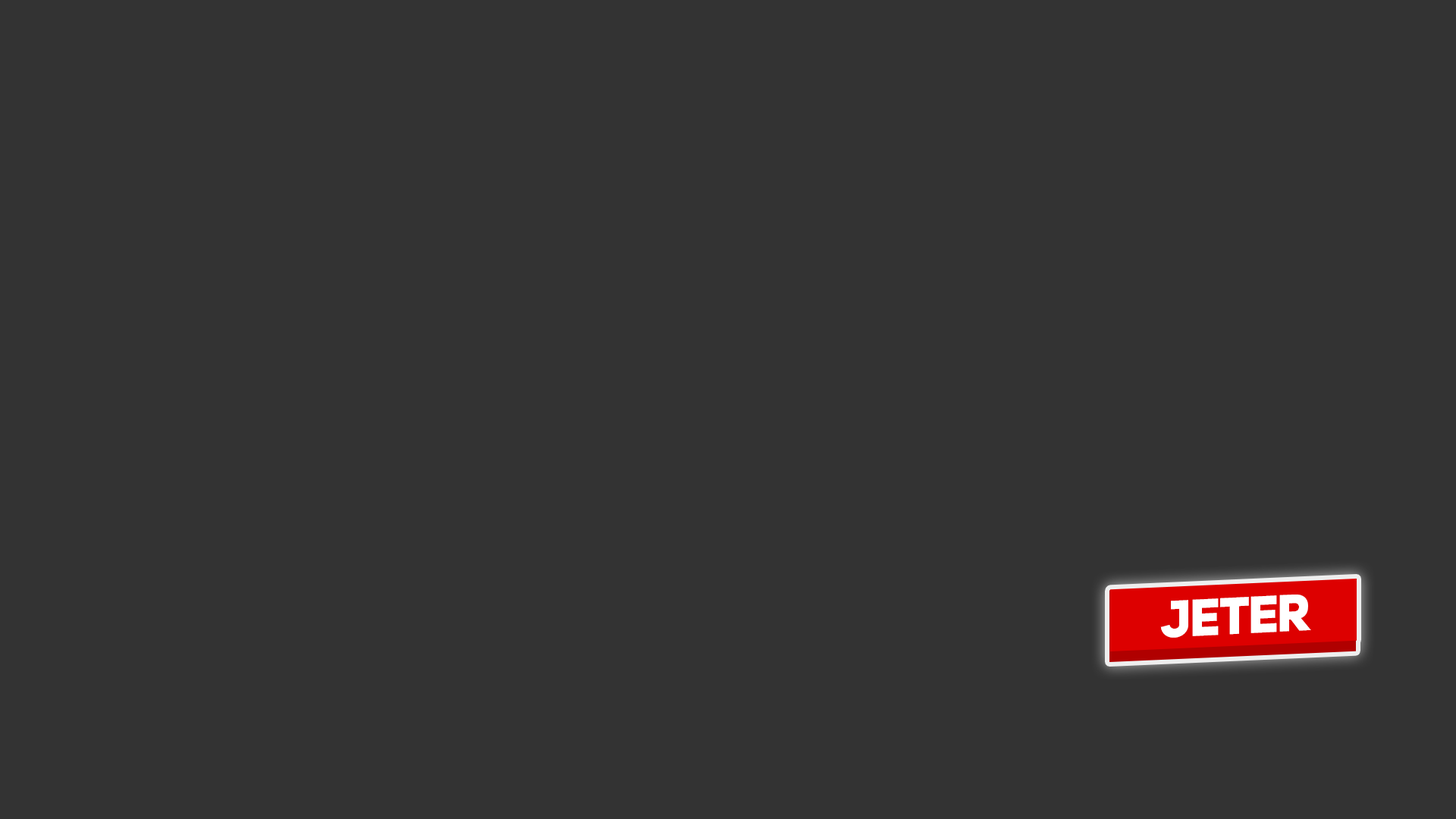
<style>
.page{position:relative;width:1456px;height:819px;background:#333333}
.page>*{position:absolute;margin:0}
.t1{font:51.4px "UniSansHeavyCAPS";letter-spacing:-0.02em;color:#ffffff}
</style>
<div class="page">
<p class="t1" style="left:1160px;top:595px;width:151px;height:43px;rotate:-3deg">jeter</p>
</div>
